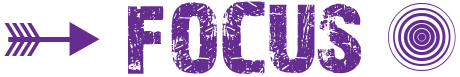
<style>
.page{position:relative;width:460px;height:77px;background:#ffffff}
.page>*{position:absolute;margin:0}
.t1{font:95px "28DaysLater";color:#662d91}
.t2{font:120px "SoftOrnamentsFourteen";color:#662d91}
.t3{font:100px "SoftOrnamentsFourteen";color:#662d91}
</style>
<div class="page">
<p class="t1" style="left:128px;top:1px;width:234px;height:74px">FOCUS</p>
<p class="t2" style="left:388px;top:3px;width:68px;height:68px">7</p>
<p class="t3" style="left:4px;top:22px;width:96px;height:34px">8</p>
</div>
